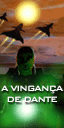
<style>
.page{position:relative;width:64px;height:128px}
.page>*{position:absolute;margin:0}
.t1{font:10px/10.7px "BankGothicBT-Medium";letter-spacing:-0.1em;color:#ffffff;text-transform:uppercase}
</style>
<div class="page">
<p class="t1" style="left:1px;top:85px;width:62px;height:17px;text-align:center">A vingança<br>de Dante</p>
</div>
